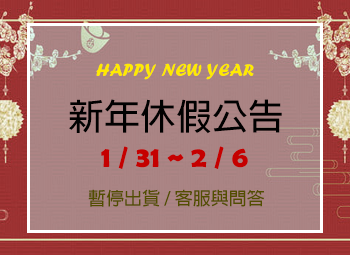
<style>
.page{position:relative;width:350px;height:255px}
.page>*{position:absolute;margin:0}
.t1{font:18px "ForteMT";color:#ffea01}
.t2{font:36px "AdobeFanHeitiStd-Bold";color:#010101}
.t3{font:30px "BerlinSansFBDemi-Bold";color:#c50000}
.t4{font:18px "AdobeFanHeitiStd-Bold";color:#534e00}
</style>
<div class="page">
<p class="t1" style="left:96px;top:63px;width:158px;height:17px">HAPPY NEW YEAR</p>
<p class="t2" style="left:69px;top:99px;width:213px;height:35px">新年休假公告</p>
<p class="t3" style="left:101px;top:146px;width:147px;height:23px">1 / 31 ~ 2 / 6</p>
<p class="t4" style="left:88px;top:189px;width:177px;height:18px">暫停出貨 / 客服與問答</p>
</div>
